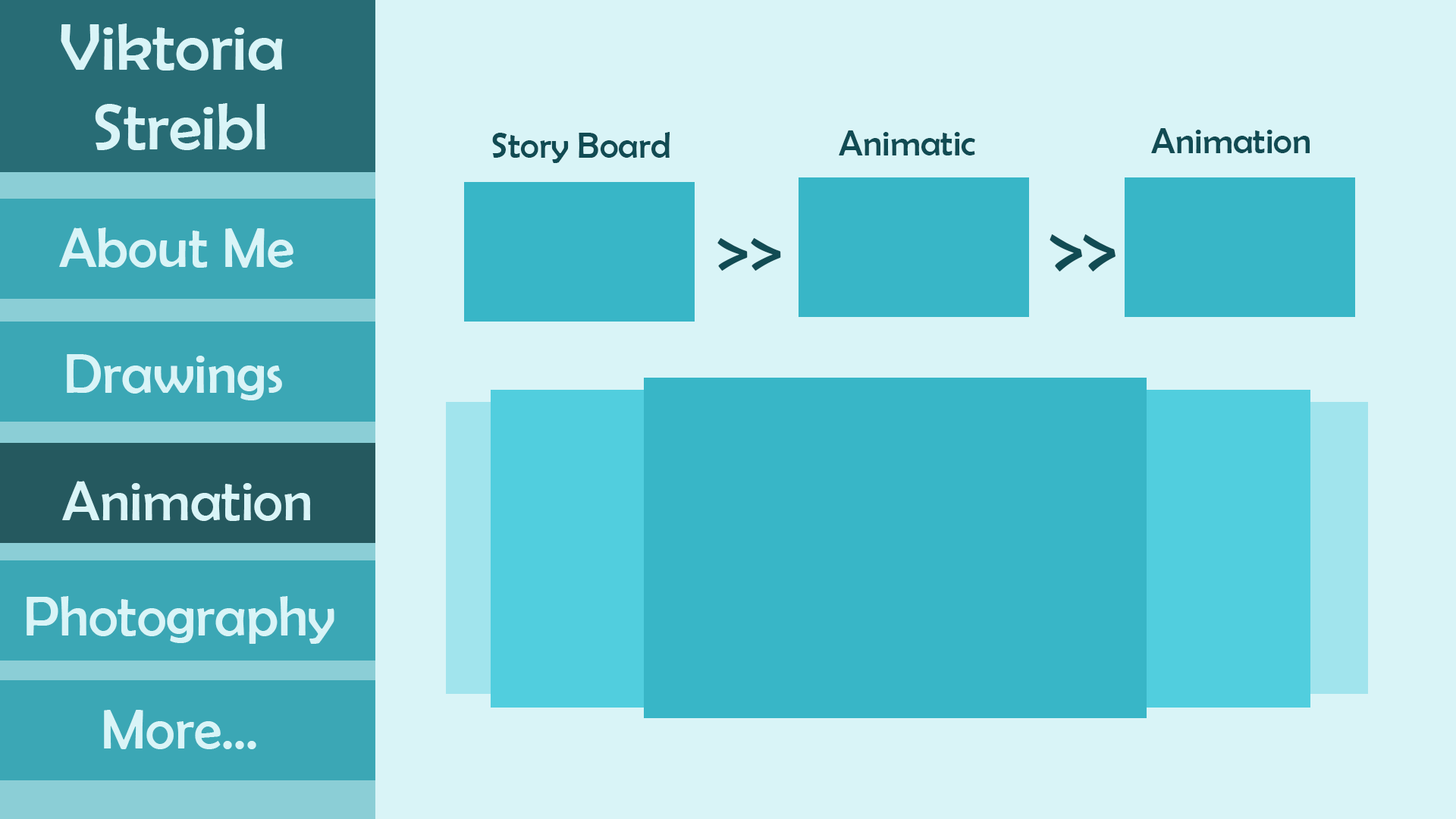
<style>
.page{position:relative;width:1456px;height:819px;background:#d9f4f7}
.page>*{position:absolute;margin:0}
.t1{font:66.3px "BerlinSansFB-Reg";color:#d9f4f7}
.t2{font:36.4px "BerlinSansFB-Reg";color:#114b53}
.t3{font:36.3px "BerlinSansFB-Reg";color:#114b53}
.t4{font:56.9px "BerlinSansFB-Reg";color:#d9f4f7}
.t5{font:72.3px "BerlinSansFB-Reg";color:#114b53;scale:1.3 1}
.t6{font:80.9px "BerlinSansFB-Reg";color:#114b53;scale:1.16 1}
</style>
<div class="page">
<p class="t1" style="left:61px;top:24px;width:222px;height:126px;text-align:center">Viktoria <br>Streibl</p>
<p class="t2" style="left:492px;top:132px;width:178px;height:31px">Story Board</p>
<p class="t3" style="left:839px;top:130px;width:136px;height:25px">Animatic</p>
<p class="t3" style="left:1151px;top:128px;width:159px;height:25px">Animation</p>
<p class="t4" style="left:59px;top:227px;width:234px;height:41px">About Me</p>
<p class="t5" style="left:717px;top:238px;width:64px;height:33px">&gt;&gt;</p>
<p class="t6" style="left:1050px;top:234px;width:65px;height:37px">&gt;&gt;</p>
<p class="t4" style="left:67px;top:354px;width:215px;height:46px">Drawings</p>
<p class="t4" style="left:62px;top:481px;width:248px;height:40px">Animation</p>
<p class="t4" style="left:27px;top:596px;width:307px;height:48px">Photography</p>
<p class="t4" style="left:104px;top:710px;width:152px;height:39px">More...</p>
</div>
